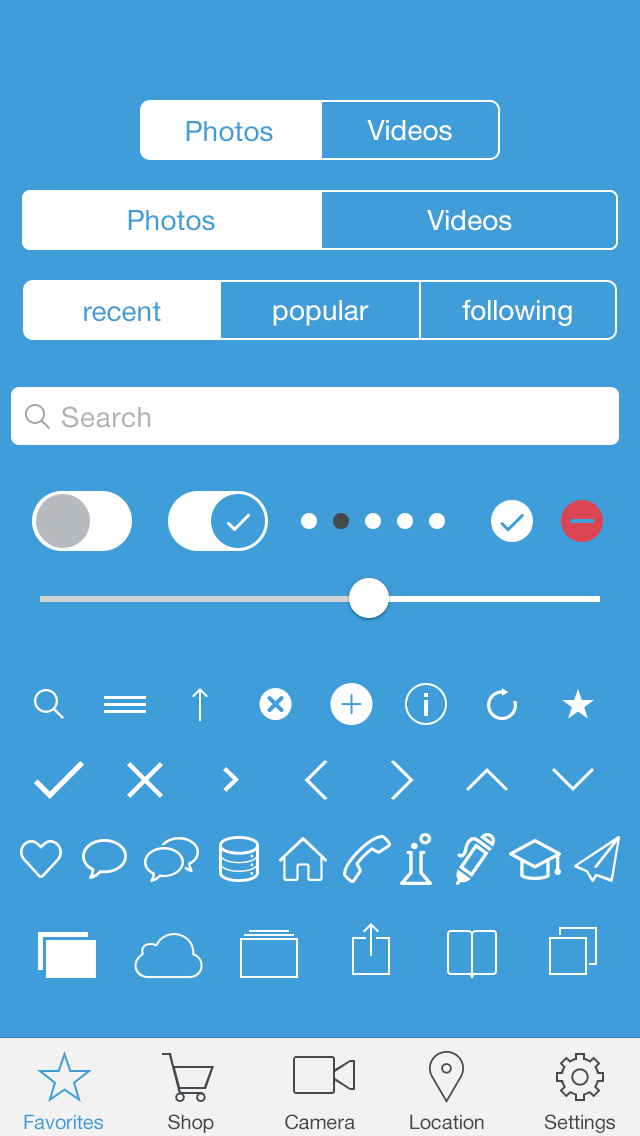
<style>
.page{position:relative;width:640px;height:1136px;background:#3f9dd9}
.page>*{position:absolute;margin:0}
.t1{font:28px "HelveticaNeue";color:#3f9dd9}
.t2{font:28px "HelveticaNeue";color:#ffffff}
.t3{font:28px "HelveticaNeue";letter-spacing:0.025em;color:#b1b3b4}
.t4{font:20px "HelveticaNeue";color:#3f9dd9}
.t5{font:20px "HelveticaNeue";color:#43494c}
</style>
<div class="page">
<p class="t1" style="left:186px;top:121px;width:87px;height:21px">Photos</p>
<p class="t2" style="left:367px;top:120px;width:85px;height:21px">Videos</p>
<p class="t1" style="left:128px;top:210px;width:87px;height:21px">Photos</p>
<p class="t2" style="left:427px;top:210px;width:85px;height:21px">Videos</p>
<p class="t1" style="left:84px;top:302px;width:77px;height:20px">recent</p>
<p class="t2" style="left:273px;top:300px;width:96px;height:26px">popular</p>
<p class="t2" style="left:462px;top:299px;width:110px;height:27px">following</p>
<p class="t3" style="left:62px;top:406px;width:89px;height:22px">Search</p>
<p class="t4" style="left:24px;top:1114px;width:79px;height:16px">Favorites</p>
<p class="t5" style="left:168px;top:1114px;width:46px;height:19px">Shop</p>
<p class="t5" style="left:285px;top:1114px;width:70px;height:16px">Camera</p>
<p class="t5" style="left:410px;top:1114px;width:74px;height:16px">Location</p>
<p class="t5" style="left:544px;top:1114px;width:71px;height:19px">Settings</p>
</div>
